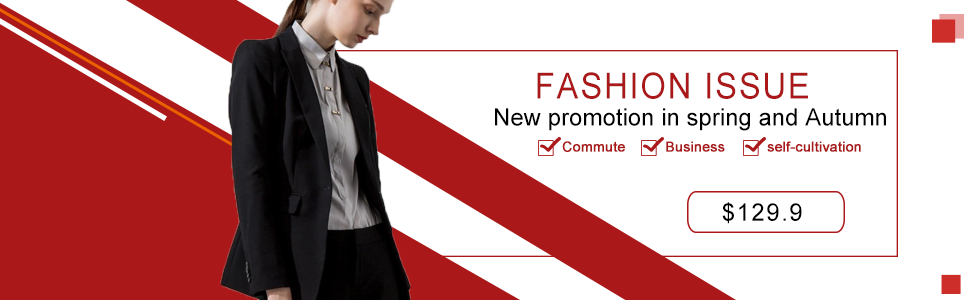
<style>
.page{position:relative;width:980px;height:300px;background:#ffffff}
.page>*{position:absolute;margin:0}
.t1{font:36px "ArialMT";letter-spacing:0.06em;color:#aa1819;text-transform:uppercase;scale:0.9 1}
.t2{font:24px "ArialMT";color:#010101}
.t3{font:14px "ArialMT";color:#aa1819;font-weight:bold}
.t4{font:24.4px "ArialMT";letter-spacing:0.06em;color:#000000;text-transform:uppercase}
</style>
<div class="page">
<p class="t1" style="left:537px;top:72px;width:271px;height:27px">fashion issue</p>
<p class="t2" style="left:495px;top:108px;width:391px;height:23px">New promotion in spring and Autumn</p>
<p class="t3" style="left:562px;top:141px;width:63px;height:11px">Commute</p>
<p class="t3" style="left:666px;top:141px;width:59px;height:11px">Business</p>
<p class="t3" style="left:767px;top:141px;width:94px;height:11px">self-cultivation</p>
<p class="t4" style="left:722px;top:202px;width:80px;height:22px">$129.9</p>
</div>
